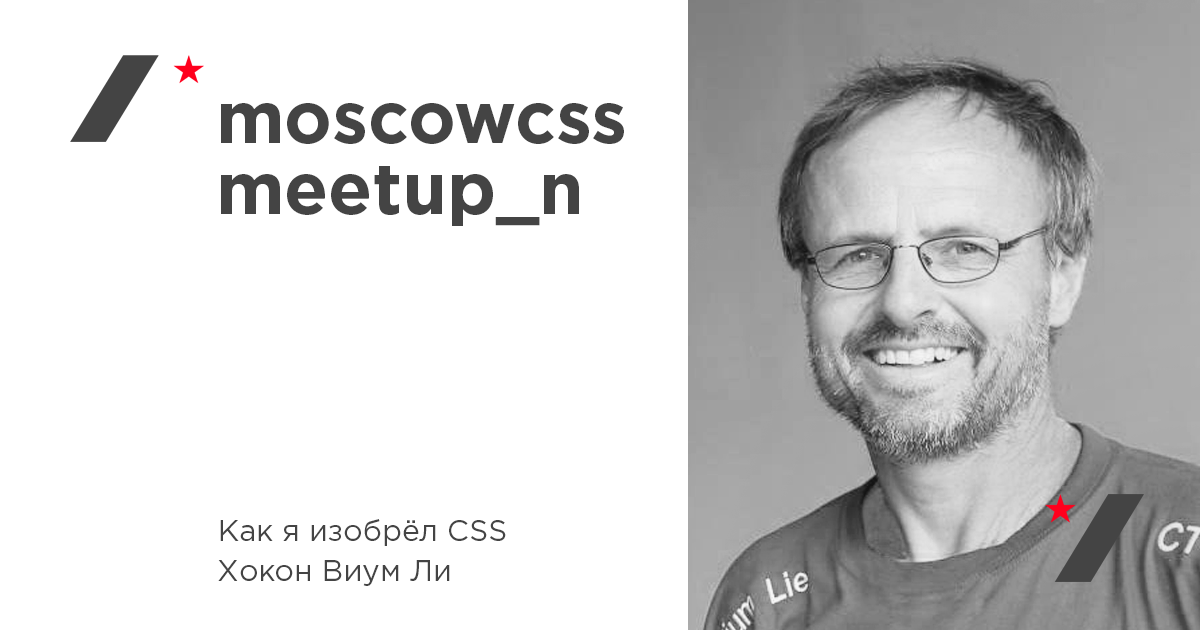
<style>
.page{position:relative;width:1200px;height:630px;background:#ffffff}
.page>*{position:absolute;margin:0}
.t1{font:72px/70.5px "GothamPro-Bold";color:#444444}
.t2{font:30px/40px "GothamPro";color:#444444}
</style>
<div class="page">
<p class="t1" style="left:221px;top:103px;width:403px;height:123px">moscowcss<br>meetup_n</p>
<p class="t2" style="left:218px;top:519px;width:288px;height:67px">Как я изобрёл CSS<br>Хокон Виум Ли</p>
</div>
